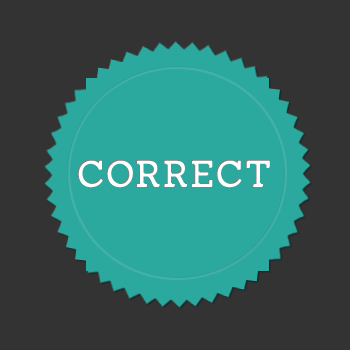
<style>
.page{position:relative;width:350px;height:350px;background:#333333}
.page>*{position:absolute;margin:0}
.t1{font:36px "Sanchez-Regular";letter-spacing:0.04em;color:#ffffff;font-weight:bold}
</style>
<div class="page">
<p class="t1" style="left:77px;top:159px;width:193px;height:29px">CORRECT</p>
</div>
